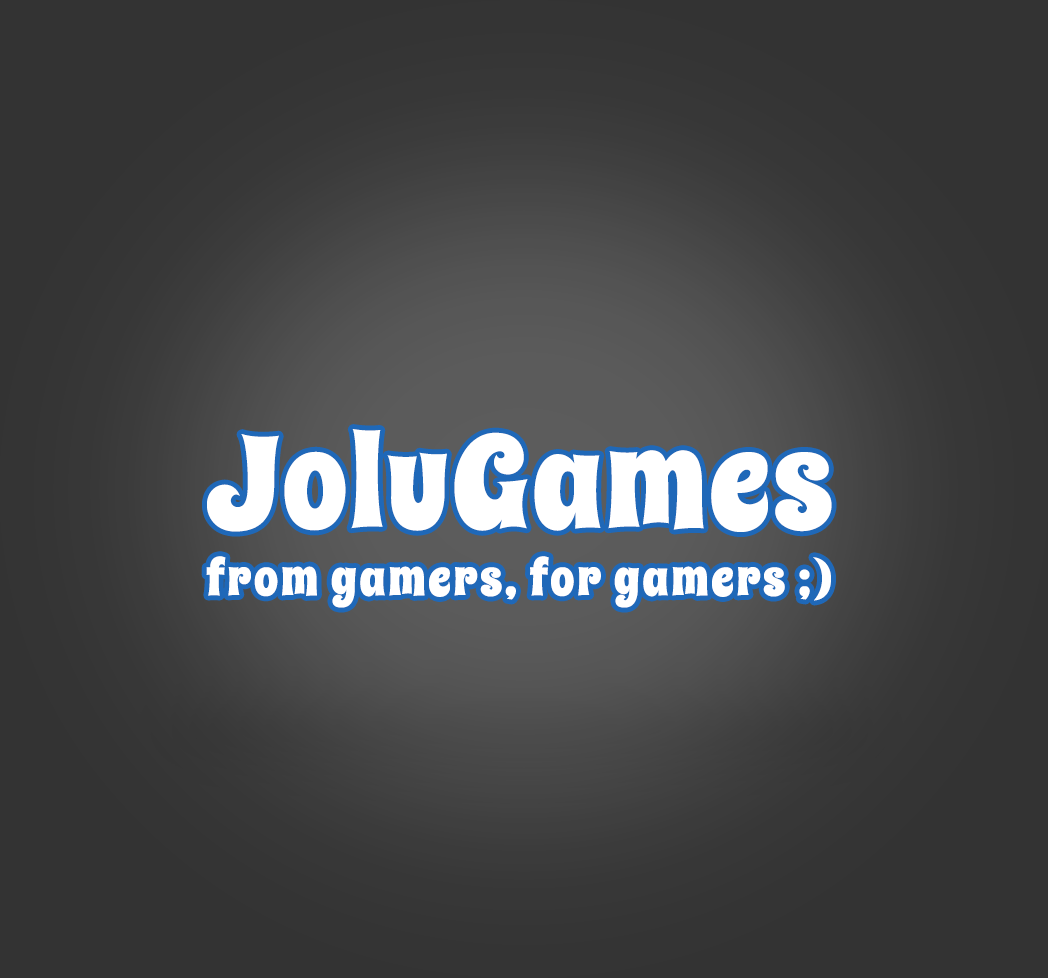
<style>
.page{position:relative;width:1048px;height:978px;background:#333333}
.page>*{position:absolute;margin:0}
.t1{font:130px "SpicyRice-Regular";letter-spacing:0.025em;color:#ffffff}
.t2{font:48px "SpicyRice-Regular";letter-spacing:0.06em;color:#ffffff}
</style>
<div class="page">
<p class="t1" style="left:207px;top:429px;width:625px;height:103px">JoluGames</p>
<p class="t2" style="left:206px;top:556px;width:625px;height:52px">from gamers, for gamers ;)</p>
</div>
